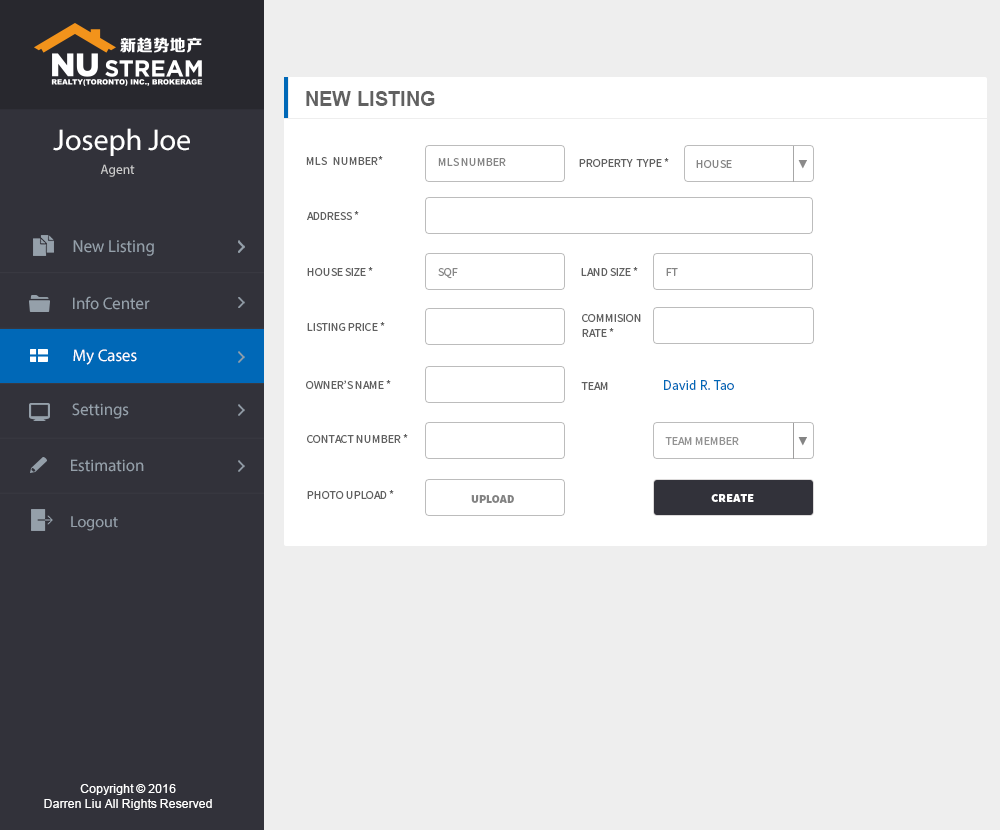
<style>
.page{position:relative;width:1000px;height:830px;background:#ffffff}
.page>*{position:absolute;margin:0}
.t1{font:20px "Arial-BoldMT";color:#616161}
.t2{font:30px "MyriadPro-Regular";color:#ffffff}
.t3{font:12px "SourceSansPro-Regular";color:#616161}
.t4{font:12px "SourceSansPro-Regular";color:#868686}
.t5{font:10px "AdobeHeitiStd-Regular";color:#8b8a8a}
.t6{font:13.4px "MyriadPro-Regular";color:#cccccc}
.t7{font:17.6px "MyriadPro-Regular";color:#95a0aa;scale:0.96 1}
.t8{font:12px "SourceSansPro-Regular";color:#878787}
.t9{font:12px "SourceSansPro-Regular";color:#858585}
.t10{font:16.8px "MyriadPro-Regular";color:#95a0aa}
.t11{font:16.8px "MyriadPro-Regular";color:#ffffff}
.t12{font:14px "SourceSansPro-Regular";color:#0068b7}
.t13{font:12px "SourceSansPro-Regular";color:#939393}
.t14{font:10px "AdobeHeitiStd-Regular";color:#848484}
.t15{font:12px "SourceSansPro-Black";color:#838383}
.t16{font:12px "SourceSansPro-Black";color:#ffffff}
.t17{font:16px "MyriadPro-Regular";color:#95a0aa}
.t18{font:12px "ArialMT";color:#ffffff}
</style>
<div class="page">
<p class="t1" style="left:306px;top:91px;width:129px;height:15px">NEW LISTING</p>
<p class="t2" style="left:53px;top:128px;width:137px;height:28px">Joseph Joe</p>
<p class="t3" style="left:306px;top:156px;width:77px;height:9px">MLS   NUMBER*</p>
<p class="t4" style="left:438px;top:158px;width:68px;height:8px">MLS NUMBER</p>
<p class="t3" style="left:579px;top:158px;width:90px;height:9px">PROPERTY  TYPE *</p>
<p class="t4" style="left:696px;top:160px;width:36px;height:8px">HOUSE</p>
<p class="t5" style="left:798px;top:160px;width:9px;height:9px">▼</p>
<p class="t6" style="left:100px;top:164px;width:35px;height:13px">Agent</p>
<p class="t3" style="left:307px;top:211px;width:52px;height:9px">ADDRESS *</p>
<p class="t7" style="left:73px;top:240px;width:81px;height:16px">New Listing</p>
<p class="t3" style="left:307px;top:267px;width:66px;height:9px">HOUSE SIZE *</p>
<p class="t8" style="left:438px;top:268px;width:20px;height:11px">SQF</p>
<p class="t3" style="left:581px;top:267px;width:57px;height:9px">LAND SIZE *</p>
<p class="t9" style="left:666px;top:268px;width:12px;height:8px">FT</p>
<p class="t10" style="left:73px;top:296px;width:77px;height:14px">Info Center</p>
<p class="t3" style="left:582px;top:314px;width:59px;height:23px">COMMISION<br>RATE *</p>
<p class="t3" style="left:307px;top:322px;width:78px;height:9px">LISTING PRICE *</p>
<p class="t11" style="left:73px;top:349px;width:64px;height:16px">My Cases</p>
<p class="t3" style="left:306px;top:380px;width:85px;height:9px">OWNER’S NAME *</p>
<p class="t3" style="left:581px;top:382px;width:27px;height:8px">TEAM</p>
<p class="t12" style="left:664px;top:380px;width:70px;height:10px">David R. Tao</p>
<p class="t10" style="left:72px;top:403px;width:57px;height:16px">Settings</p>
<p class="t3" style="left:307px;top:434px;width:101px;height:9px">CONTACT NUMBER *</p>
<p class="t13" style="left:665px;top:437px;width:74px;height:8px">TEAM MEMBER</p>
<p class="t14" style="left:798px;top:437px;width:9px;height:9px">▼</p>
<p class="t10" style="left:71px;top:459px;width:73px;height:13px">Estimation</p>
<p class="t3" style="left:307px;top:490px;width:87px;height:9px">PHOTO UPLOAD *</p>
<p class="t15" style="left:471px;top:495px;width:43px;height:8px">UPLOAD</p>
<p class="t16" style="left:711px;top:494px;width:43px;height:8px">CREATE</p>
<p class="t17" style="left:71px;top:516px;width:47px;height:15px">Logout</p>
<p class="t18" style="left:44px;top:784px;width:168px;height:26px;text-align:center">Copyright © 2016<br>Darren Liu All Rights Reserved</p>
</div>
